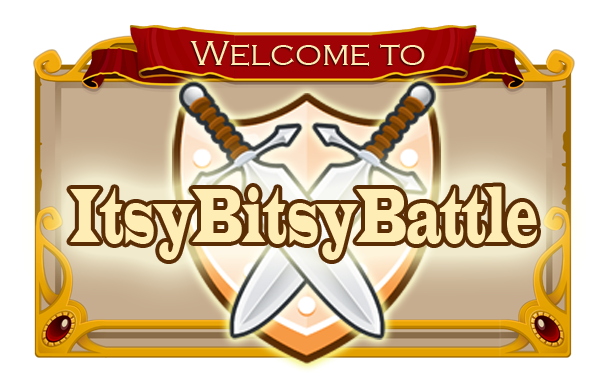
<style>
.page{position:relative;width:600px;height:376px;background:#ffffff}
.page>*{position:absolute;margin:0}
.t1{font:35.7px "CopperplateGothic-Light";color:#feedb5}
.t2{font:79.5px "LatinWide";color:#feedb5;scale:0.45 1}
</style>
<div class="page">
<p class="t1" style="left:190px;top:41px;width:235px;height:25px">Welcome to</p>
<p class="t2" style="left:70px;top:186px;width:467px;height:74px">ItsyBitsyBattle</p>
</div>
